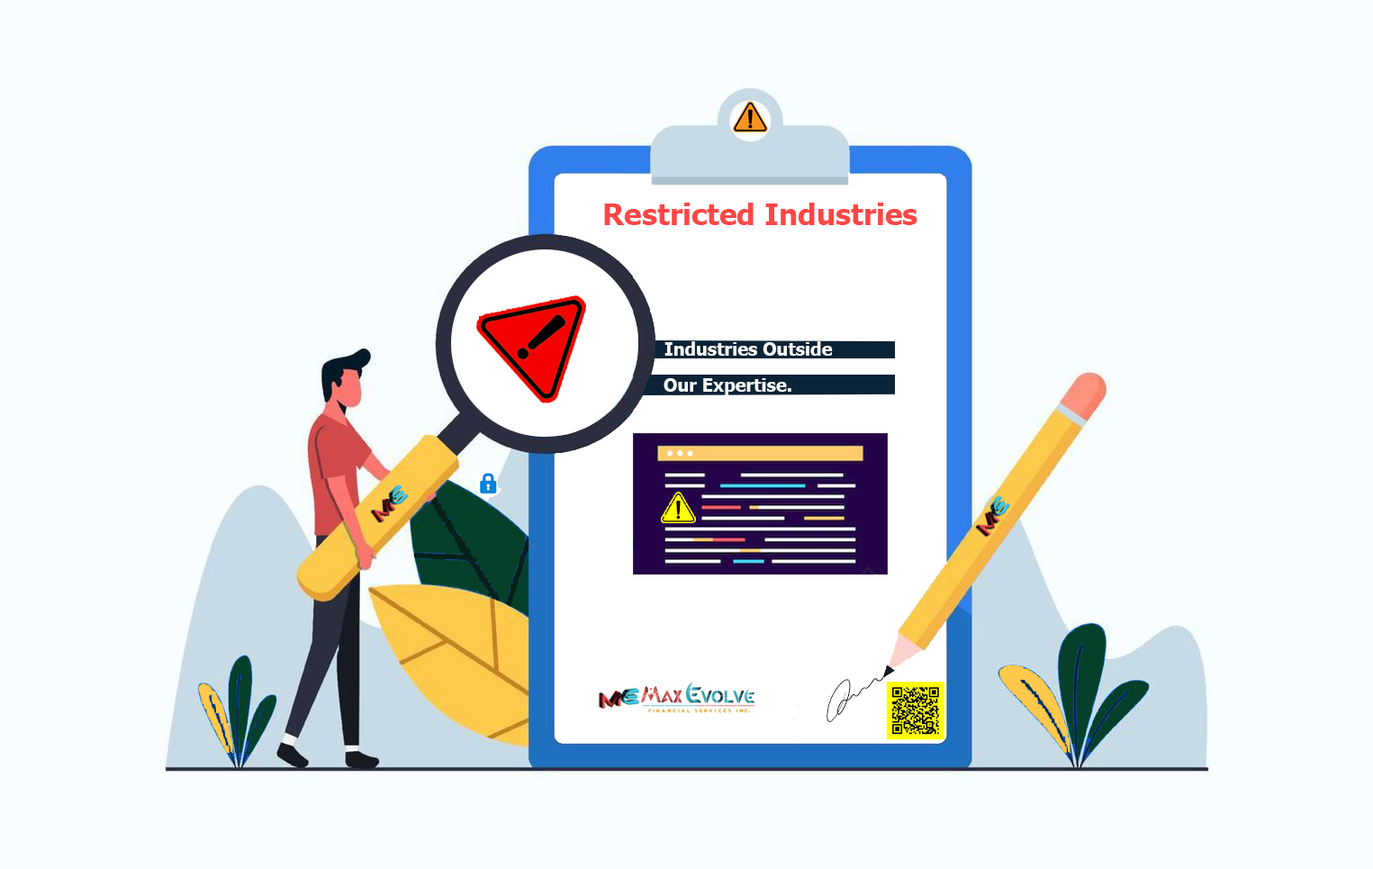
<style>
.page{position:relative;width:1373px;height:869px;background:#f8fdff}
.page>*{position:absolute;margin:0}
.t1{font:29.7px "Tahoma-Bold";color:#ff4646}
.t2{font:18px "Tahoma-Bold";color:#fefffd}
.t3{font:18px "Tahoma-Bold";color:#f8fdff}
</style>
<div class="page">
<p class="t1" style="left:604px;top:203px;width:313px;height:22px">Restricted Industries</p>
<p class="t2" style="left:664px;top:341px;width:169px;height:15px">Industries Outside</p>
<p class="t3" style="left:663px;top:378px;width:128px;height:17px">Our Expertise.</p>
</div>
